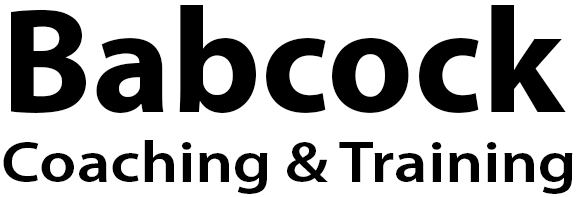
<style>
.page{position:relative;width:577px;height:197px;background:#ffffff}
.page>*{position:absolute;margin:0}
.t1{font:58.3px "MyriadPro-Semibold";color:#000000;scale:1.14 1}
.t2{font:150px "MyriadPro-Bold";color:#000000}
</style>
<div class="page">
<p class="t1" style="left:3px;top:5px;width:570px;height:189px"><span class="t2">Babcock<br></span>Coaching &amp; Training</p>
</div>
